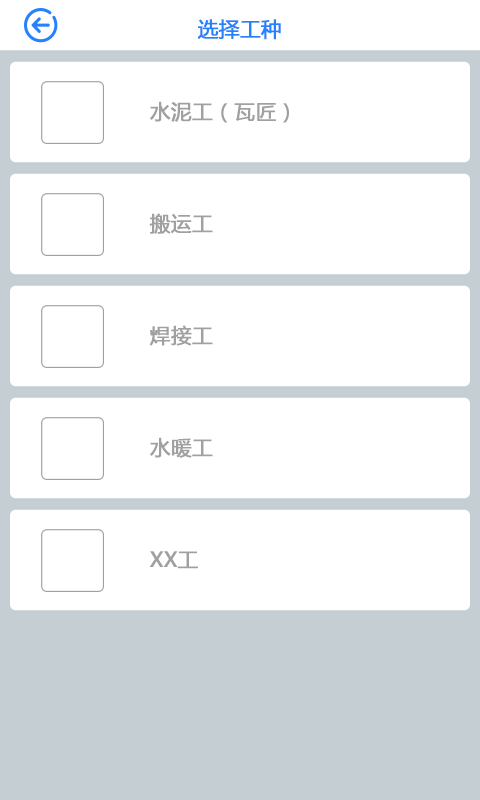
<style>
.page{position:relative;width:480px;height:800px;background:#ffffff}
.page>*{position:absolute;margin:0}
.t1{font:20.6px "MicrosoftYaHei";color:#2681fc;font-weight:bold}
.t2{font:20.6px "MicrosoftYaHei";color:#a0a0a0;font-weight:bold}
</style>
<div class="page">
<p class="t1" style="left:197px;top:19px;width:84px;height:21px">选择工种</p>
<p class="t2" style="left:150px;top:101px;width:139px;height:22px">水泥工（瓦匠）</p>
<p class="t2" style="left:149px;top:213px;width:64px;height:21px">搬运工</p>
<p class="t2" style="left:149px;top:325px;width:64px;height:21px">焊接工</p>
<p class="t2" style="left:150px;top:437px;width:63px;height:21px">水暖工</p>
<p class="t2" style="left:149px;top:551px;width:49px;height:18px">XX工</p>
</div>
